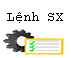
<style>
.page{position:relative;width:71px;height:58px;background:#ffffff}
.page>*{position:absolute;margin:0}
.t1{font:14px "CourierNewPSMT";color:#000000}
</style>
<div class="page">
<p class="t1" style="left:7px;top:12px;width:56px;height:11px">Lệnh SX</p>
</div>
